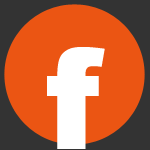
<style>
.page{position:relative;width:150px;height:150px;background:#eb5513}
.page>*{position:absolute;margin:0}
.t1{font:140px "Arial-Black";color:#ffffff}
</style>
<div class="page">
<p class="t1" style="left:47px;top:47px;width:58px;height:102px">f</p>
</div>
